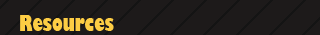
<style>
.page{position:relative;width:320px;height:35px;background:#1d1a1a}
.page>*{position:absolute;margin:0}
.t1{font:22px "GillSans-UltraBoldCondensed";color:#fdcd44}
</style>
<div class="page">
<p class="t1" style="left:20px;top:15px;width:94px;height:16px">Resources</p>
</div>
